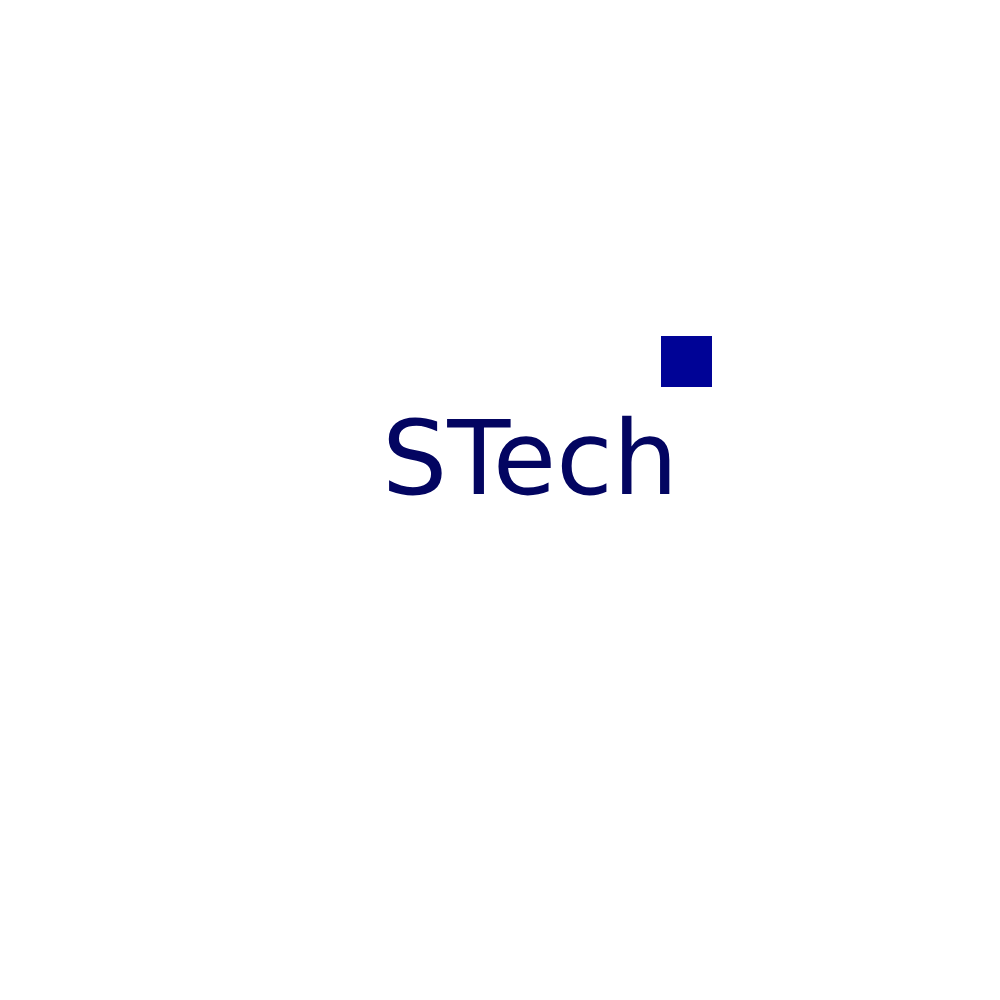
<style>
.page{position:relative;width:1000px;height:1000px;background:#ffffff}
.page>*{position:absolute;margin:0}
.t1{font:103px "DejaVuSans";color:#030561}
</style>
<div class="page">
<p class="t1" style="left:388px;top:415px;width:282px;height:81px">STech</p>
</div>
